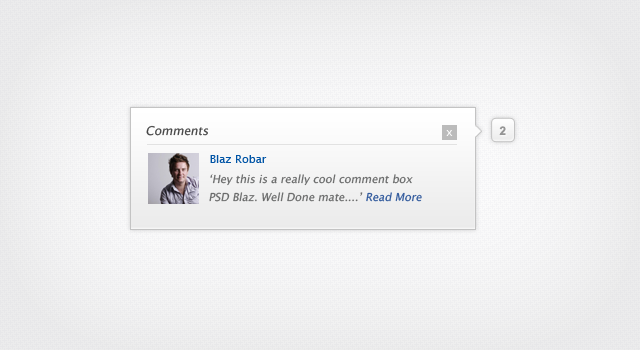
<style>
.page{position:relative;width:640px;height:350px}
.page>*{position:absolute;margin:0}
.t1{font:12px "LucidaGrande";color:#464646;font-style:italic}
.t2{font:12px "Arial-BoldMT";color:#959595}
.t3{font:11px "LucidaGrande";color:#ffffff}
.t4{font:11px "LucidaGrande";color:#0054a6}
.t5{font:11px/18px "LucidaGrande";color:#6a6b6b;font-style:italic}
.t6{font:11px/18px "LucidaGrande";color:#30599c;font-style:italic}
</style>
<div class="page">
<p class="t1" style="left:146px;top:125px;width:63px;height:11px">Comments</p>
<p class="t2" style="left:499px;top:126px;width:7px;height:9px">2</p>
<p class="t3" style="left:446px;top:130px;width:7px;height:6px">x</p>
<p class="t4" style="left:210px;top:155px;width:57px;height:8px">Blaz Robar</p>
<p class="t5" style="left:209px;top:174px;width:213px;height:28px">‘Hey this is a really cool comment box PSD Blaz. Well Done mate....’ <span class="t6">Read More</span></p>
</div>
